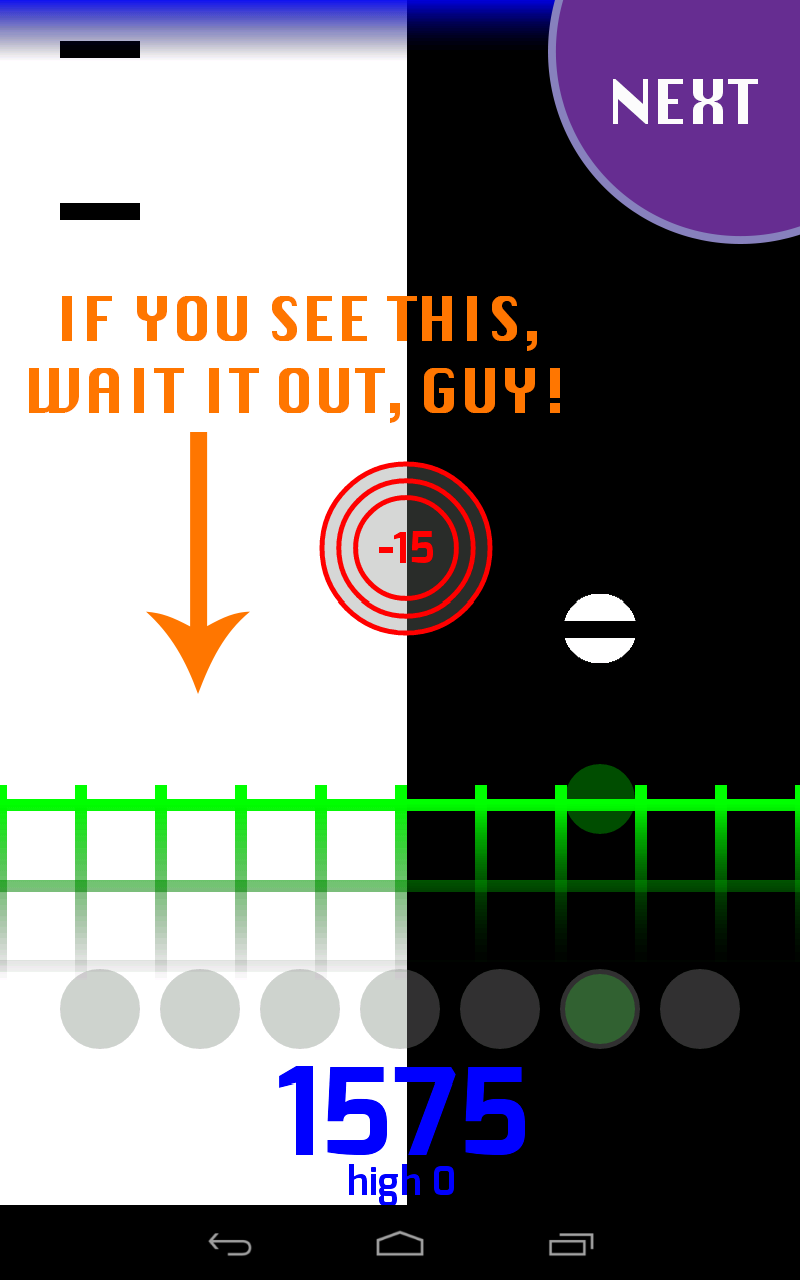
<style>
.page{position:relative;width:800px;height:1280px;background:#000000}
.page>*{position:absolute;margin:0}
.t1{font:60px "Silom";color:#fcfcfc}
.t2{font:60px "Silom";color:#ff7600}
</style>
<div class="page">
<p class="t1" style="left:613px;top:79px;width:145px;height:45px">NEXT</p>
<p class="t2" style="left:29px;top:296px;width:531px;height:127px;text-align:center">IF YOU SEE THIS,<br>WAIT IT OUT, GUY!</p>
</div>
